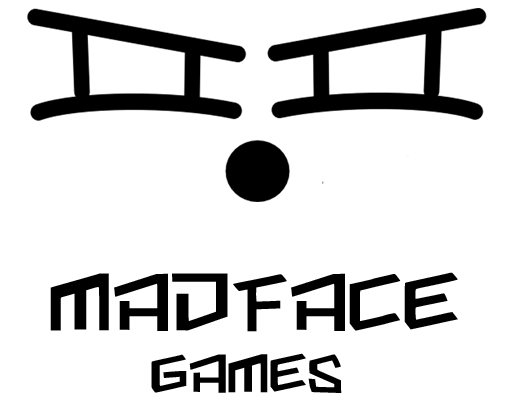
<style>
.page{position:relative;width:512px;height:406px;background:#ffffff}
.page>*{position:absolute;margin:0}
.t1{font:72px "SpaceMeOut-Regular";letter-spacing:-0.04em;color:#000000;scale:1.03 1}
.t2{font:48px "SpaceMeOut-Regular";letter-spacing:-0.04em;color:#000000;scale:1.03 1}
</style>
<div class="page">
<p class="t1" style="left:50px;top:272px;width:408px;height:60px">MADFACE</p>
<p class="t2" style="left:151px;top:353px;width:191px;height:40px">GAMES</p>
</div>
